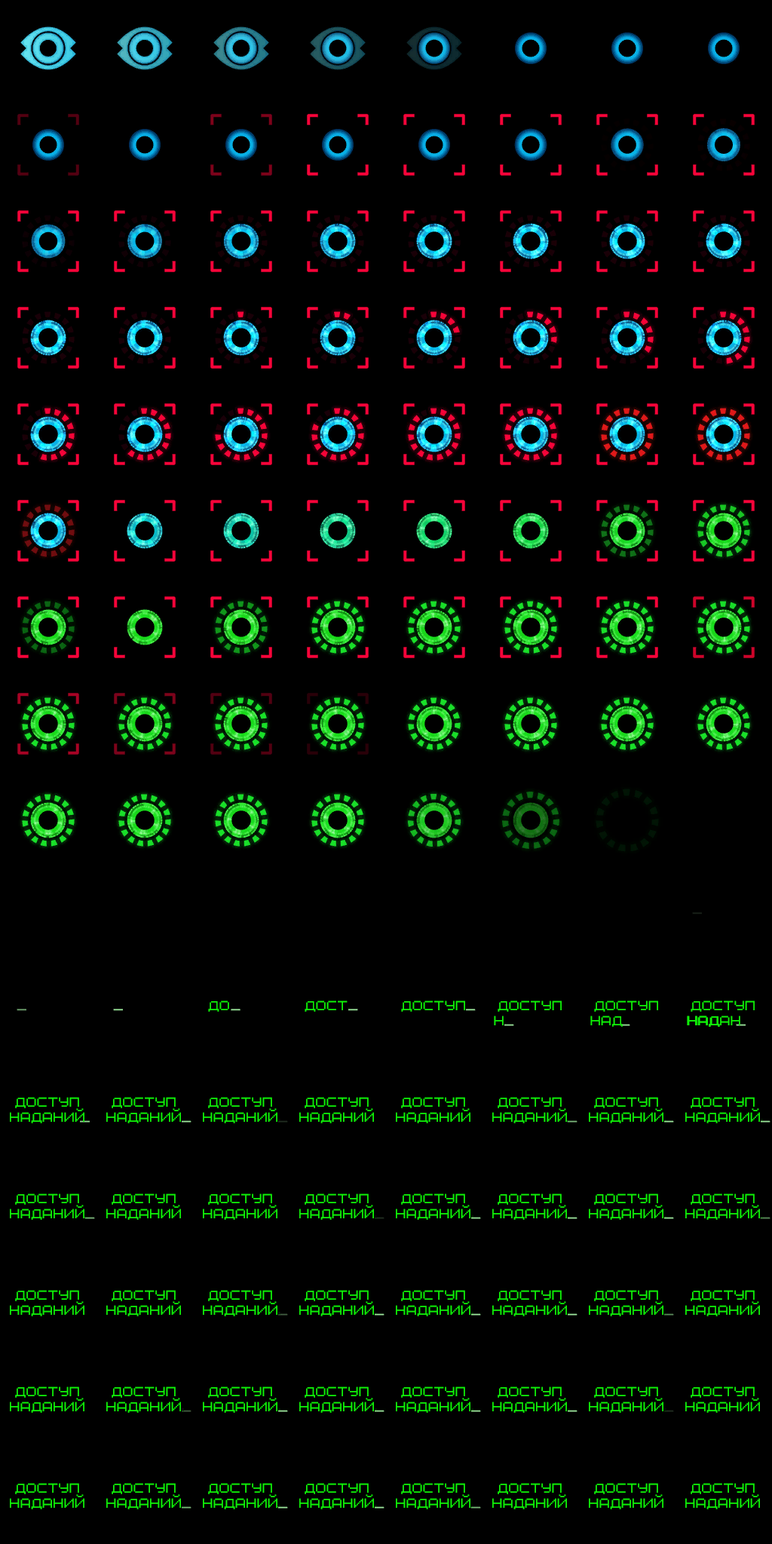
<style>
.page{position:relative;width:772px;height:1544px;background:#000000}
.page>*{position:absolute;margin:0}
.t1{font:12.4px "Citadel-Regular";color:#10ef08}
</style>
<div class="page">
<p class="t1" style="left:208px;top:1001px;width:21px;height:11px">до</p>
<p class="t1" style="left:305px;top:1001px;width:43px;height:11px">дост</p>
<p class="t1" style="left:401px;top:1001px;width:64px;height:11px">доступ</p>
<p class="t1" style="left:498px;top:1001px;width:64px;height:11px">доступ</p>
<p class="t1" style="left:594px;top:1001px;width:64px;height:11px">доступ</p>
<p class="t1" style="left:691px;top:1001px;width:64px;height:11px">доступ</p>
<p class="t1" style="left:494px;top:1016px;width:10px;height:10px">н</p>
<p class="t1" style="left:590px;top:1016px;width:33px;height:11px">над</p>
<p class="t1" style="left:687px;top:1016px;width:53px;height:11px">надан</p>
<p class="t1" style="left:688px;top:1016px;width:32px;height:11px">над</p>
<p class="t1" style="left:10px;top:1097px;width:74px;height:27px;text-align:center">доступ<br>наданий</p>
<p class="t1" style="left:106px;top:1097px;width:75px;height:27px;text-align:center">доступ<br>наданий</p>
<p class="t1" style="left:203px;top:1097px;width:74px;height:27px;text-align:center">доступ<br>наданий</p>
<p class="t1" style="left:299px;top:1097px;width:75px;height:27px;text-align:center">доступ<br>наданий</p>
<p class="t1" style="left:396px;top:1097px;width:75px;height:27px;text-align:center">доступ<br>наданий</p>
<p class="t1" style="left:492px;top:1097px;width:75px;height:27px;text-align:center">доступ<br>наданий</p>
<p class="t1" style="left:589px;top:1097px;width:75px;height:27px;text-align:center">доступ<br>наданий</p>
<p class="t1" style="left:685px;top:1097px;width:75px;height:27px;text-align:center">доступ<br>наданий</p>
<p class="t1" style="left:10px;top:1194px;width:74px;height:26px;text-align:center">доступ<br>наданий</p>
<p class="t1" style="left:106px;top:1194px;width:75px;height:26px;text-align:center">доступ<br>наданий</p>
<p class="t1" style="left:203px;top:1194px;width:74px;height:26px;text-align:center">доступ<br>наданий</p>
<p class="t1" style="left:299px;top:1194px;width:75px;height:26px;text-align:center">доступ<br>наданий</p>
<p class="t1" style="left:396px;top:1194px;width:75px;height:26px;text-align:center">доступ<br>наданий</p>
<p class="t1" style="left:492px;top:1194px;width:75px;height:26px;text-align:center">доступ<br>наданий</p>
<p class="t1" style="left:589px;top:1194px;width:75px;height:26px;text-align:center">доступ<br>наданий</p>
<p class="t1" style="left:685px;top:1194px;width:75px;height:26px;text-align:center">доступ<br>наданий</p>
<p class="t1" style="left:10px;top:1290px;width:74px;height:27px;text-align:center">доступ<br>наданий</p>
<p class="t1" style="left:106px;top:1290px;width:75px;height:27px;text-align:center">доступ<br>наданий</p>
<p class="t1" style="left:203px;top:1290px;width:74px;height:27px;text-align:center">доступ<br>наданий</p>
<p class="t1" style="left:299px;top:1290px;width:75px;height:27px;text-align:center">доступ<br>наданий</p>
<p class="t1" style="left:396px;top:1290px;width:75px;height:27px;text-align:center">доступ<br>наданий</p>
<p class="t1" style="left:492px;top:1290px;width:75px;height:27px;text-align:center">доступ<br>наданий</p>
<p class="t1" style="left:589px;top:1290px;width:75px;height:27px;text-align:center">доступ<br>наданий</p>
<p class="t1" style="left:685px;top:1290px;width:75px;height:27px;text-align:center">доступ<br>наданий</p>
<p class="t1" style="left:10px;top:1387px;width:74px;height:26px;text-align:center">доступ<br>наданий</p>
<p class="t1" style="left:106px;top:1387px;width:75px;height:26px;text-align:center">доступ<br>наданий</p>
<p class="t1" style="left:203px;top:1387px;width:74px;height:26px;text-align:center">доступ<br>наданий</p>
<p class="t1" style="left:299px;top:1387px;width:75px;height:26px;text-align:center">доступ<br>наданий</p>
<p class="t1" style="left:396px;top:1387px;width:75px;height:26px;text-align:center">доступ<br>наданий</p>
<p class="t1" style="left:492px;top:1387px;width:75px;height:26px;text-align:center">доступ<br>наданий</p>
<p class="t1" style="left:589px;top:1387px;width:75px;height:26px;text-align:center">доступ<br>наданий</p>
<p class="t1" style="left:685px;top:1387px;width:75px;height:26px;text-align:center">доступ<br>наданий</p>
<p class="t1" style="left:10px;top:1483px;width:74px;height:27px;text-align:center">доступ<br>наданий</p>
<p class="t1" style="left:106px;top:1483px;width:75px;height:27px;text-align:center">доступ<br>наданий</p>
<p class="t1" style="left:203px;top:1483px;width:74px;height:27px;text-align:center">доступ<br>наданий</p>
<p class="t1" style="left:299px;top:1483px;width:75px;height:27px;text-align:center">доступ<br>наданий</p>
<p class="t1" style="left:396px;top:1483px;width:75px;height:27px;text-align:center">доступ<br>наданий</p>
<p class="t1" style="left:492px;top:1483px;width:75px;height:27px;text-align:center">доступ<br>наданий</p>
<p class="t1" style="left:589px;top:1483px;width:75px;height:27px;text-align:center">доступ<br>наданий</p>
<p class="t1" style="left:685px;top:1483px;width:75px;height:27px;text-align:center">доступ<br>наданий</p>
</div>
